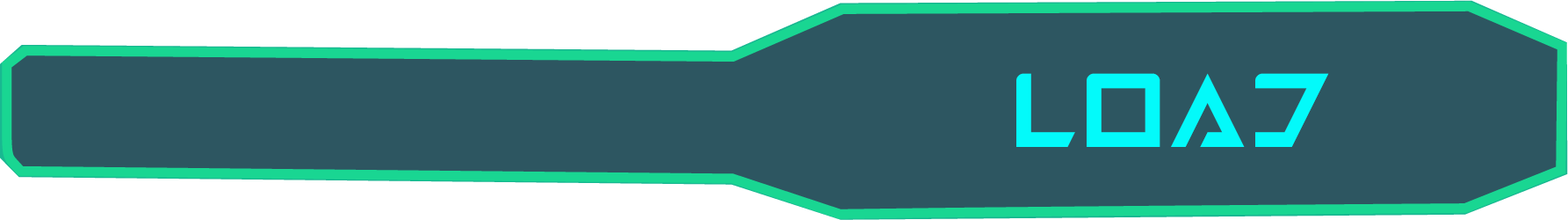
<style>
.page{position:relative;width:1568px;height:220px;background:#2d5661}
.page>*{position:absolute;margin:0}
.t1{font:73.2px "Astro";color:#03fafa}
</style>
<div class="page">
<p class="t1" style="left:1016px;top:73px;width:313px;height:74px">load</p>
</div>
